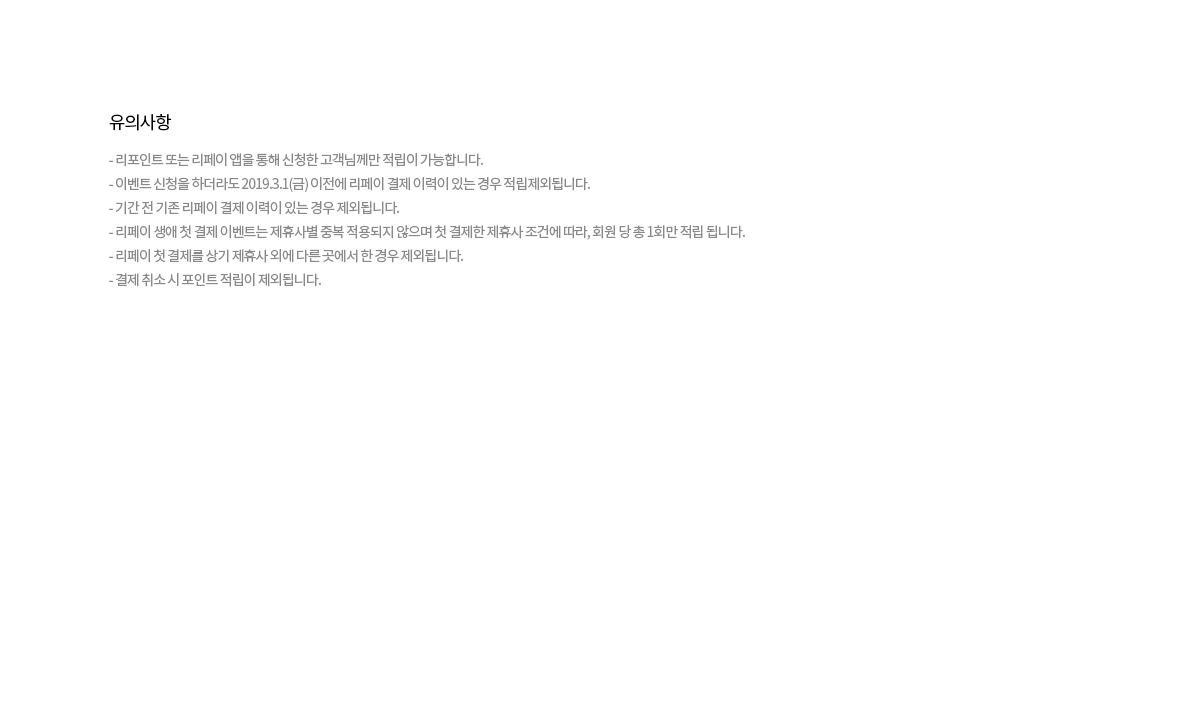
<style>
.page{position:relative;width:1184px;height:724px;background:#ffffff}
.page>*{position:absolute;margin:0}
.t1{font:18px "NotoSansKR-Regular";letter-spacing:-0.06em;color:#000000}
.t2{font:14px/24px "NotoSansKR-Regular";letter-spacing:-0.065em;color:#898989}
</style>
<div class="page">
<p class="t1" style="left:109px;top:114px;width:63px;height:17px">유의사항</p>
<p class="t2" style="left:109px;top:153px;width:636px;height:134px">- 리포인트 또는 리페이 앱을 통해 신청한 고객님께만 적립이 가능합니다.<br>- 이벤트 신청을 하더라도 2019.3.1(금) 이전에 리페이 결제 이력이 있는 경우 적립제외됩니다.<br>- 기간 전 기존 리페이 결제 이력이 있는 경우 제외됩니다.<br>- 리페이 생애 첫 결제 이벤트는 제휴사별 중복 적용되지 않으며 첫 결제한 제휴사 조건에 따라, 회원 당 총 1회만 적립 됩니다.<br>- 리페이 첫 결제를 상기 제휴사 외에 다른 곳에서 한 경우 제외됩니다.<br>- 결제 취소 시 포인트 적립이 제외됩니다.</p>
</div>
